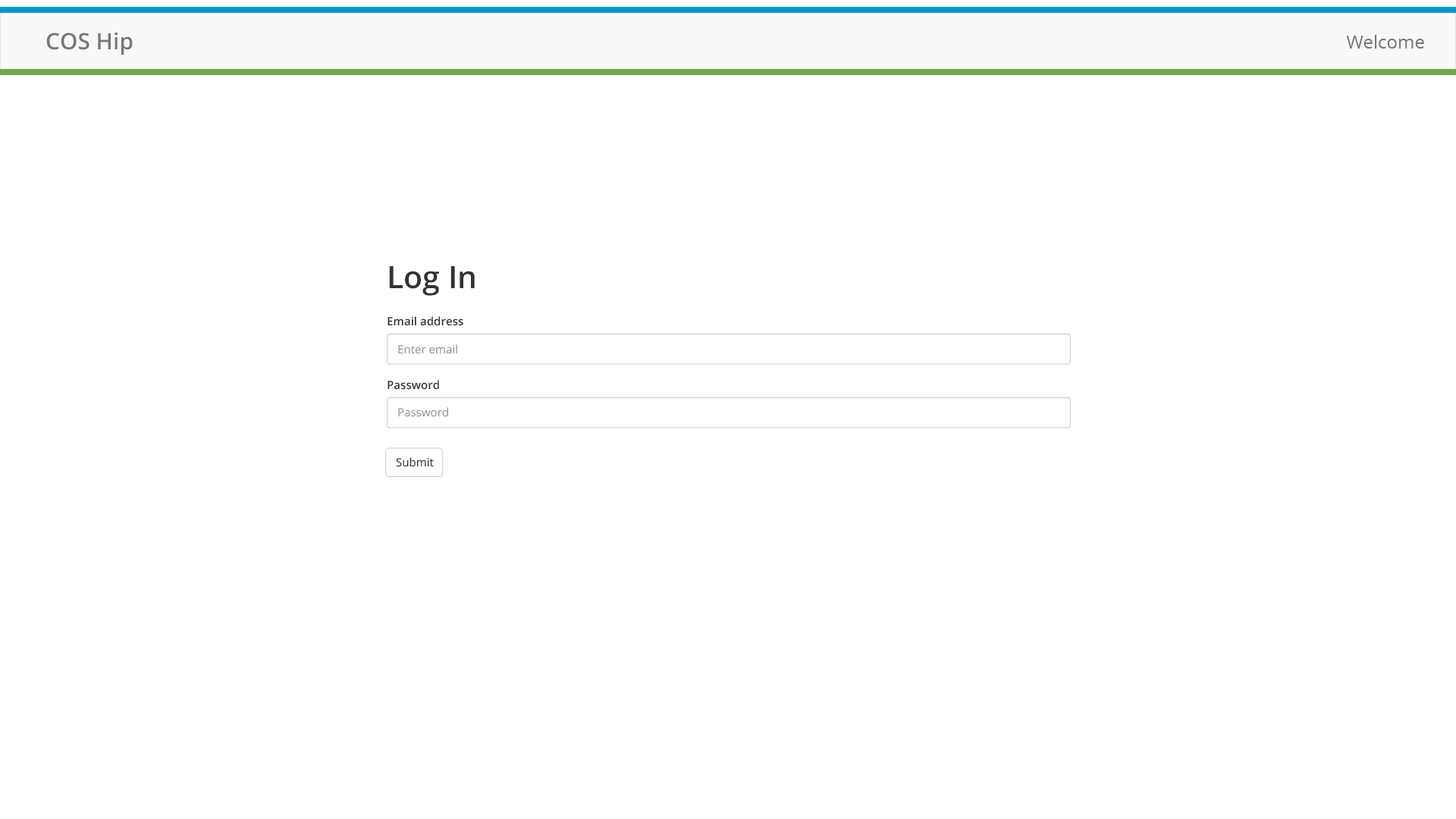
<style>
.page{position:relative;width:1456px;height:819px;background:#ffffff}
.page>*{position:absolute;margin:0}
.t1{font:22.6px "OpenSans-Semibold";color:#777777}
.t2{font:18.2px "OpenSans";color:#777777}
.t3{font:30.8px "OpenSans-Semibold";color:#333333}
.t4{font:11.4px "OpenSans-Semibold";color:#333333}
.t5{font:11.4px "OpenSans";color:#999999}
.t6{font:11.4px "OpenSans";color:#333333}
</style>
<div class="page">
<p class="t1" style="left:46px;top:32px;width:87px;height:23px">COS Hip</p>
<p class="t2" style="left:1346px;top:35px;width:78px;height:14px">Welcome</p>
<p class="t3" style="left:389px;top:266px;width:86px;height:30px">Log In</p>
<p class="t4" style="left:388px;top:316px;width:75px;height:10px">Email address</p>
<p class="t5" style="left:398px;top:344px;width:59px;height:10px">Enter email</p>
<p class="t4" style="left:388px;top:380px;width:51px;height:10px">Password</p>
<p class="t5" style="left:398px;top:407px;width:50px;height:10px">Password</p>
<p class="t6" style="left:396px;top:457px;width:38px;height:10px">Submit</p>
</div>
